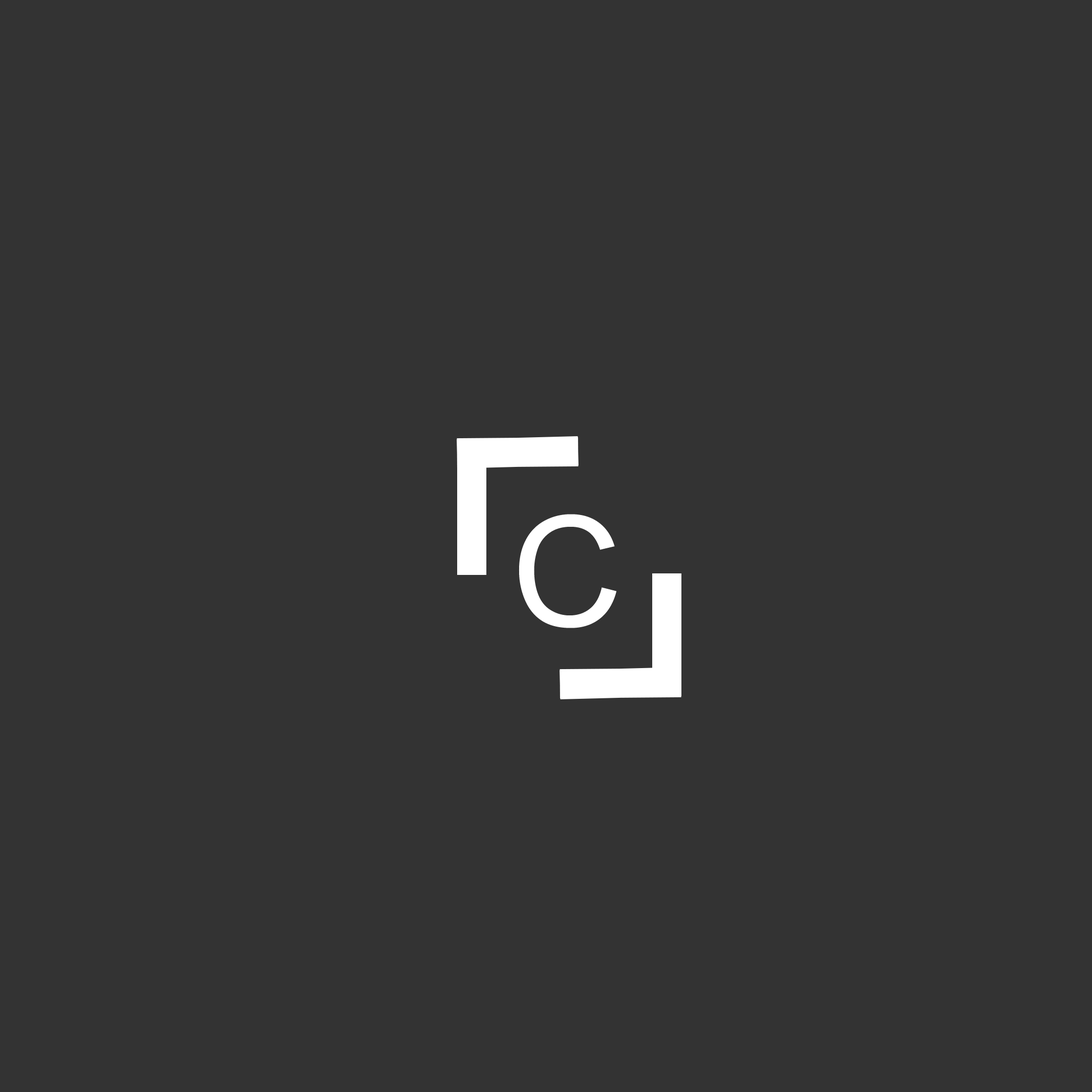
<style>
.page{position:relative;width:1092px;height:1092px;background:#333333}
.page>*{position:absolute;margin:0}
.t1{font:153.6px "ArialMT";color:#ffffff}
</style>
<div class="page">
<p class="t1" style="left:519px;top:514px;width:97px;height:114px">C</p>
</div>
